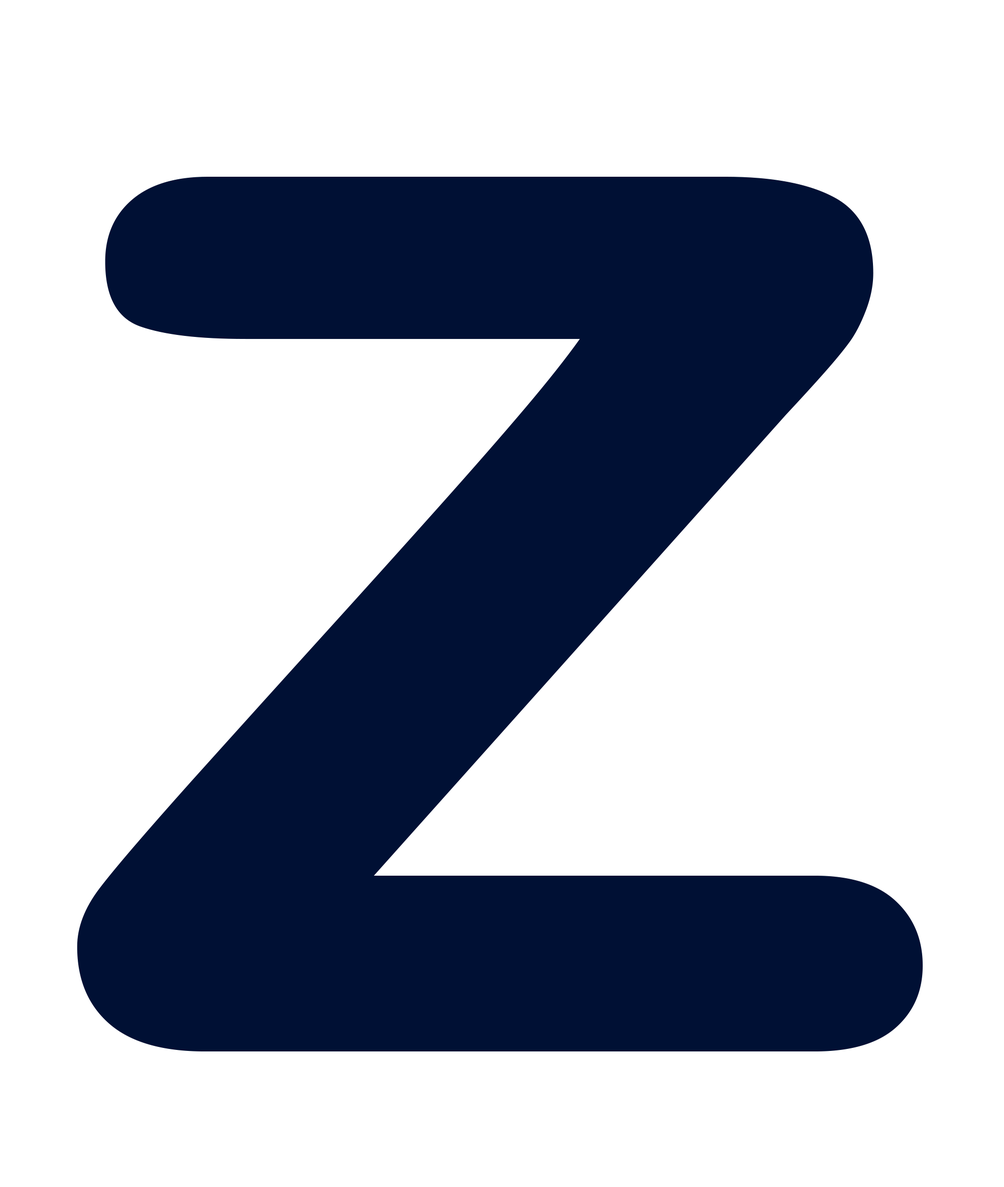
<style>
.page{position:relative;width:1004px;height:1187px;background:#ffffff}
.page>*{position:absolute;margin:0}
.t1{font:1688.8px "ArialRoundedMTBold";color:#001034}
</style>
<div class="page">
<p class="t1" style="left:77px;top:177px;width:847px;height:875px">z</p>
</div>
